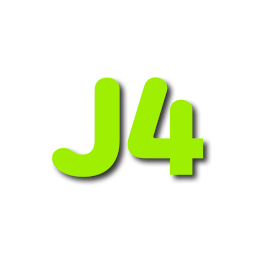
<style>
.page{position:relative;width:256px;height:256px;background:#ffffff}
.page>*{position:absolute;margin:0}
.t1{font:120px "Jalnan";color:#9eef01}
</style>
<div class="page">
<p class="t1" style="left:52px;top:77px;width:152px;height:100px">J4</p>
</div>
